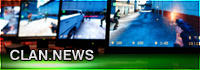
<style>
.page{position:relative;width:200px;height:70px}
.page>*{position:absolute;margin:0}
.t1{font:14px "Swiss721BT-Bold";color:#e4e2e2}
</style>
<div class="page">
<p class="t1" style="left:10px;top:49px;width:84px;height:11px">CLAN.NEWS</p>
</div>
